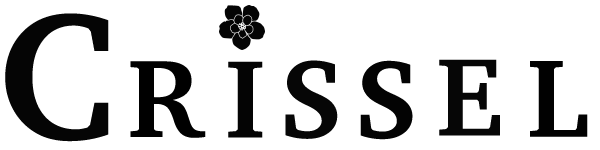
<style>
.page{position:relative;width:600px;height:150px;background:#ffffff}
.page>*{position:absolute;margin:0}
.t1{font:183.3px "Charter-Bold";color:#050505}
.t2{font:112.5px "Charter-Bold";color:#000000}
.t3{font:112.5px "Charter-Bold";color:#040404}
.t4{font:112.5px "Charter-Bold";color:#060606}
.t5{font:112.5px "Charter-Bold";color:#030303}
.t6{font:112.5px "Charter-Bold";color:#010101}
</style>
<div class="page">
<p class="t1" style="left:5px;top:13px;width:104px;height:129px">C</p>
<p class="t2" style="left:130px;top:61px;width:76px;height:77px">R</p>
<p class="t3" style="left:228px;top:61px;width:35px;height:77px">I</p>
<p class="t4" style="left:285px;top:60px;width:53px;height:79px">S</p>
<p class="t5" style="left:360px;top:60px;width:53px;height:80px">S</p>
<p class="t4" style="left:439px;top:59px;width:61px;height:77px">E`</p>
<p class="t6" style="left:530px;top:61px;width:58px;height:76px">L</p>
</div>
